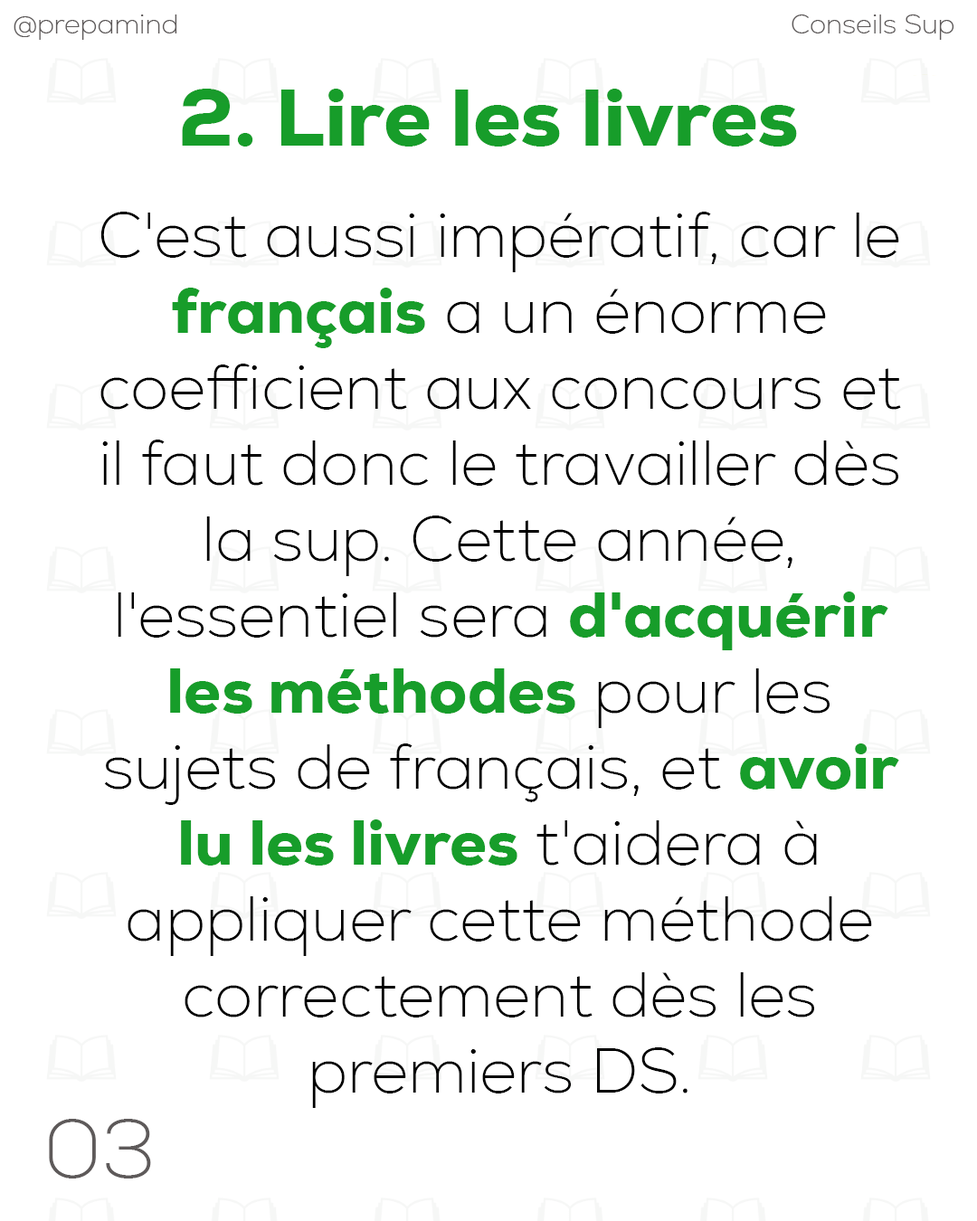
<style>
.page{position:relative;width:977px;height:1221px;background:#ffffff}
.page>*{position:absolute;margin:0}
.t1{font:27.1px "Nexa-ExtraLight";color:#5e5a5a}
.t2{font:81.2px "Nexa-Heavy";color:#179d2a}
.t3{font:63.3px "Nexa-ExtraLight";color:#000000}
.t4{font:63.3px "Nexa-Heavy";color:#179d2a}
.t5{font:81.7px "Nexa-ExtraLight";color:#5e5a5a}
</style>
<div class="page">
<p class="t1" style="left:14px;top:14px;width:163px;height:26px">@prepamind</p>
<p class="t1" style="left:791px;top:14px;width:163px;height:26px">Conseils Sup</p>
<p class="t2" style="left:182px;top:89px;width:615px;height:58px">2. Lire les livres</p>
<p class="t3" style="left:100px;top:212px;width:801px;height:896px;text-align:center">C'est aussi impératif, car le <span class="t4">français</span> a un énorme coefficient aux concours et il faut donc le travailler dès la sup. Cette année, l'essentiel sera <span class="t4">d'acquérir les méthodes</span> pour les sujets de français, et <span class="t4">avoir lu les livres</span> t'aidera à appliquer cette méthode correctement dès les premiers DS.</p>
<p class="t5" style="left:49px;top:1119px;width:102px;height:59px">03</p>
</div>
